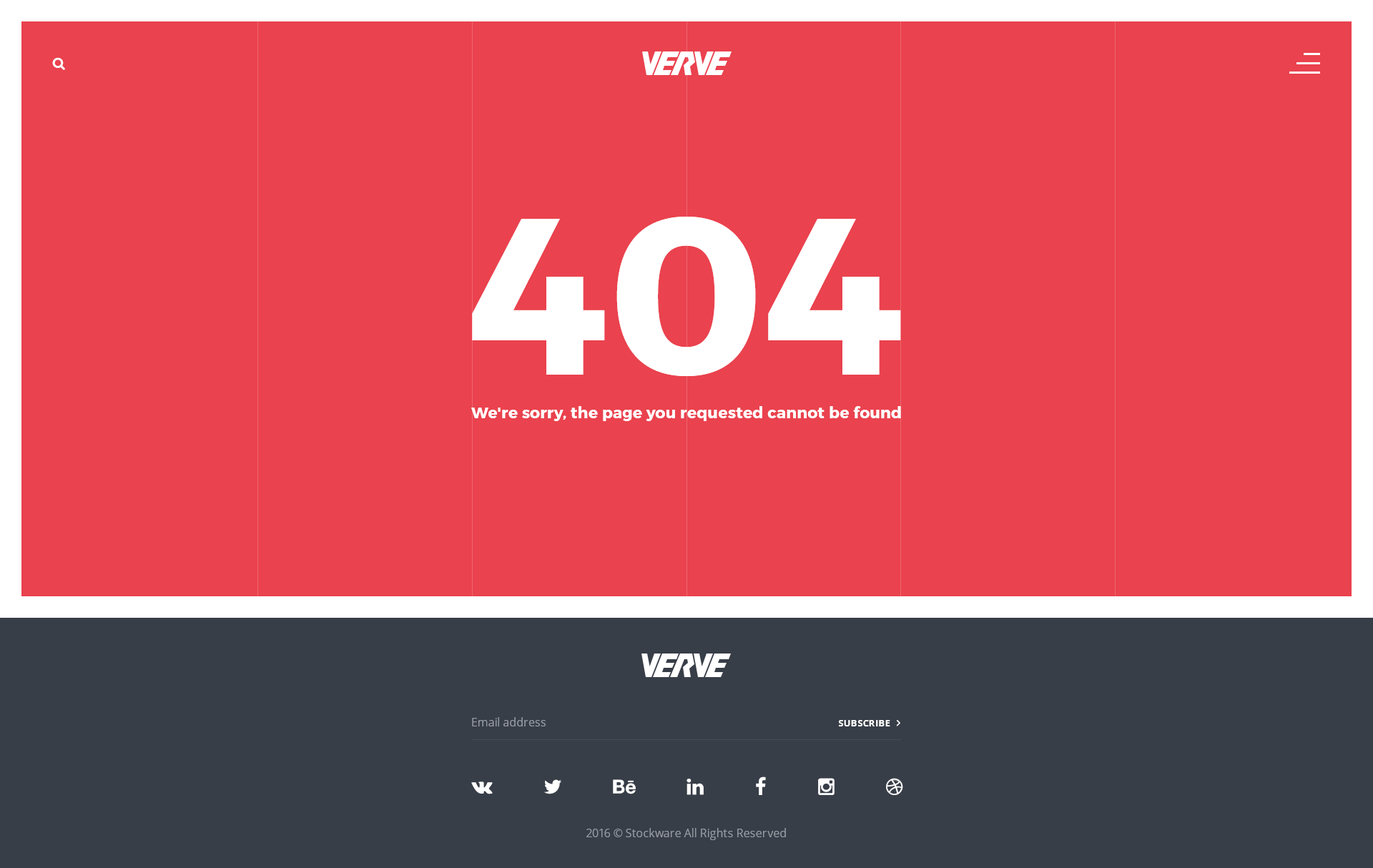
<style>
.page{position:relative;width:1373px;height:868px;background:#ea424e}
.page>*{position:absolute;margin:0}
.t1{font:223.2px "Montserrat-Bold";letter-spacing:0.02em;color:#ffffff;text-transform:uppercase}
.t2{font:15.7px "Montserrat-Bold";letter-spacing:0.016em;color:#ffffff}
.t3{font:11.4px "OpenSans";color:#969aa1}
.t4{font:9.3px "OpenSans-Bold";letter-spacing:0.02em;color:#ffffff;text-transform:uppercase}
</style>
<div class="page">
<p class="t1" style="left:472px;top:217px;width:429px;height:159px">404</p>
<p class="t2" style="left:471px;top:406px;width:430px;height:15px">We're sorry, the page you requested cannot be found</p>
<p class="t3" style="left:472px;top:717px;width:74px;height:10px">Email address</p>
<p class="t4" style="left:839px;top:720px;width:51px;height:7px">subscribe</p>
<p class="t3" style="left:587px;top:828px;width:199px;height:12px">2016 © Stockware All Rights Reserved</p>
</div>
